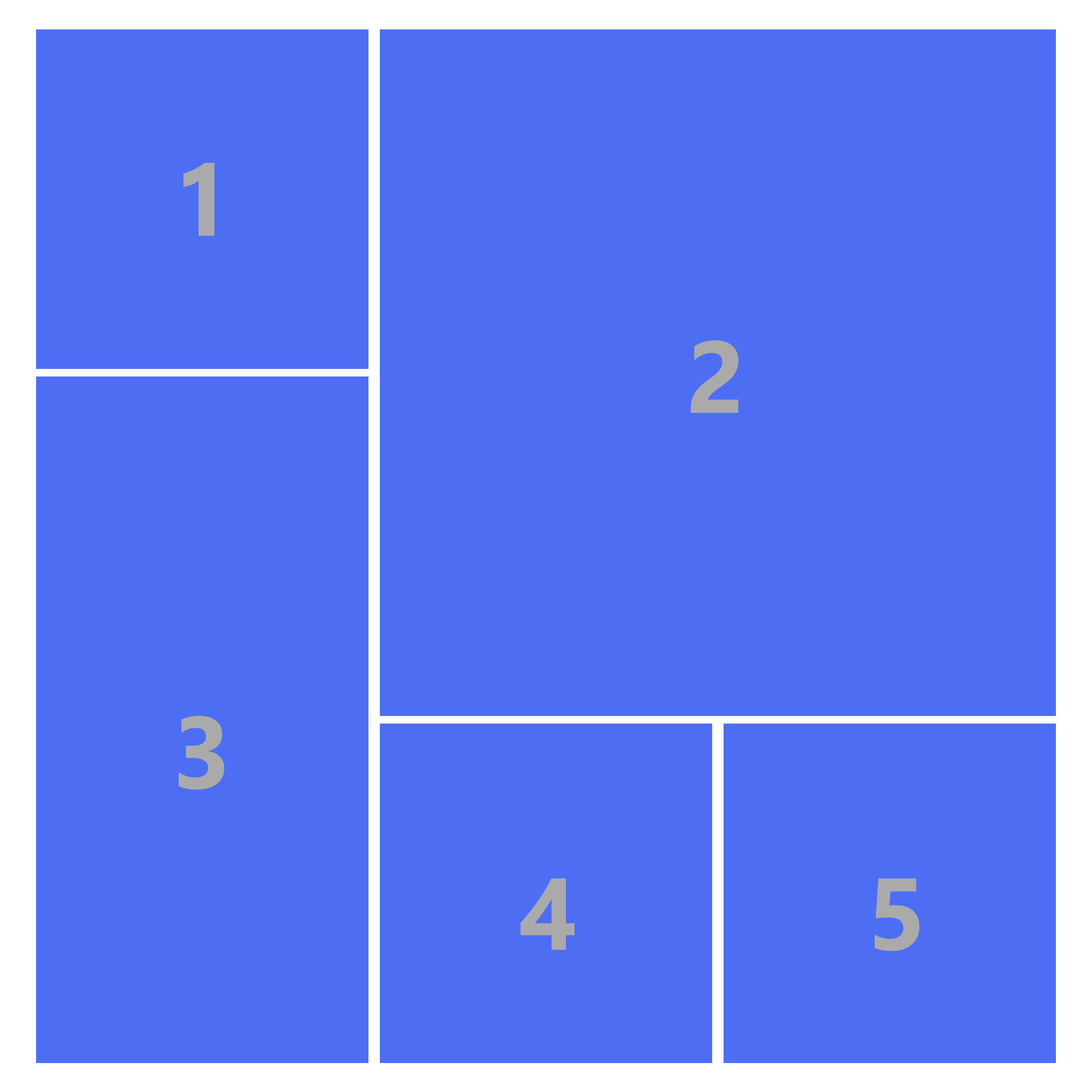
<style>
.page{position:relative;width:1092px;height:1092px;background:#4d6ef3}
.page>*{position:absolute;margin:0}
.t1{font:101.6px "Ebrima-Bold";color:#aaaaaa}
</style>
<div class="page">
<p class="t1" style="left:183px;top:163px;width:32px;height:73px">1</p>
<p class="t1" style="left:691px;top:340px;width:48px;height:73px">2</p>
<p class="t1" style="left:179px;top:715px;width:46px;height:75px">3</p>
<p class="t1" style="left:520px;top:878px;width:54px;height:72px">4</p>
<p class="t1" style="left:875px;top:878px;width:45px;height:73px">5</p>
</div>
